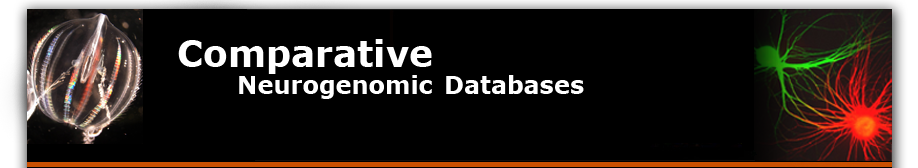
<style>
.page{position:relative;width:918px;height:168px;background:#000000}
.page>*{position:absolute;margin:0}
.t1{font:36px "Verdana-Bold";color:#ffffff}
.t2{font:24px "Verdana-Bold";color:#ffffff}
</style>
<div class="page">
<p class="t1" style="left:178px;top:39px;width:254px;height:35px">Comparative</p>
<p class="t2" style="left:239px;top:75px;width:193px;height:24px">Neurogenomic</p>
<p class="t2" style="left:446px;top:75px;width:138px;height:19px">Databases</p>
</div>
